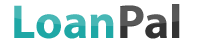
<style>
.page{position:relative;width:200px;height:56px;background:#ffffff}
.page>*{position:absolute;margin:0}
.t1{font:48px "MyriadPro-Bold"}
</style>
<div class="page">
<p class="t1" style="left:14px;top:4px;width:166px;height:35px">LoanPal</p>
</div>
